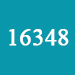
<style>
.page{position:relative;width:75px;height:75px;background:#0998ab}
.page>*{position:absolute;margin:0}
.t1{font:24px "TimesNewRomanPSMT";color:#ffffff;font-weight:bold}
</style>
<div class="page">
<p class="t1" style="left:9px;top:29px;width:60px;height:17px">16348</p>
</div>
